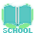
<style>
.page{position:relative;width:35px;height:35px}
.page>*{position:absolute;margin:0}
.t1{font:8.1px "BritannicBold";color:#51c5bf;text-transform:uppercase}
</style>
<div class="page">
<p class="t1" style="left:3px;top:28px;width:30px;height:5px">SCHOOL</p>
</div>
